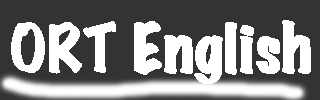
<style>
.page{position:relative;width:320px;height:100px;background:#333333}
.page>*{position:absolute;margin:0}
.t1{font:60px "MarkerFelt-Wide";color:#ffffff;font-weight:bold}
.t2{font:60px "MarkerFelt-Wide";color:#ffffff}
</style>
<div class="page">
<p class="t1" style="left:11px;top:20px;width:300px;height:64px"><span class="t2">ORT </span>English</p>
</div>
